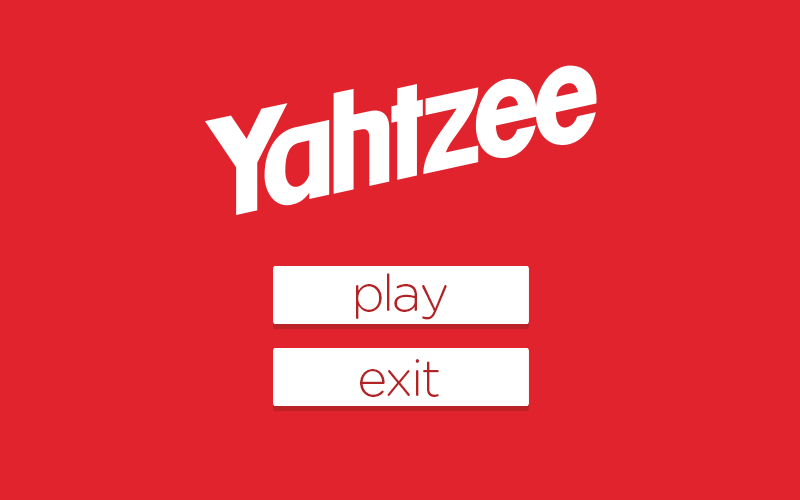
<style>
.page{position:relative;width:800px;height:500px;background:#e0232d}
.page>*{position:absolute;margin:0}
.t1{font:51.2px "GothamRounded-Light";letter-spacing:-0.05em;color:#b32325}
</style>
<div class="page">
<p class="t1" style="left:356px;top:273px;width:91px;height:47px">play</p>
<p class="t1" style="left:360px;top:359px;width:79px;height:38px">exit</p>
</div>
